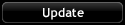
<style>
.page{position:relative;width:125px;height:25px;background:#010101}
.page>*{position:absolute;margin:0}
.t1{font:12.5px "TrebuchetMS-Bold";letter-spacing:0.015em;color:#fefefe}
</style>
<div class="page">
<p class="t1" style="left:43px;top:7px;width:41px;height:13px">Update</p>
</div>
